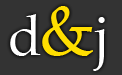
<style>
.page{position:relative;width:122px;height:75px;background:#333333}
.page>*{position:absolute;margin:0}
.t1{font:56px "PalatinoLinotype-Roman";letter-spacing:-0.05em;color:#ffffff}
.t2{font:72px "PalatinoLinotype-Roman";color:#ffde00}
.t3{font:56px "PalatinoLinotype-Roman";color:#ffffff}
</style>
<div class="page">
<p class="t1" style="left:10px;top:6px;width:95px;height:65px">d<span class="t2">&amp;</span><span class="t3">j</span></p>
</div>
